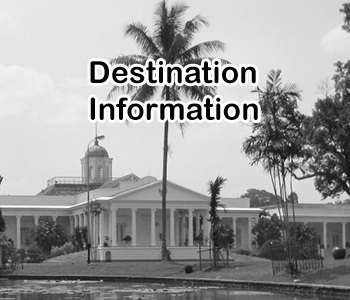
<style>
.page{position:relative;width:350px;height:300px}
.page>*{position:absolute;margin:0}
.t1{font:30.6px "ArialRoundedMTBold";letter-spacing:0.005em;color:#040404}
</style>
<div class="page">
<p class="t1" style="left:90px;top:61px;width:168px;height:59px">Destination<br>Information</p>
</div>
